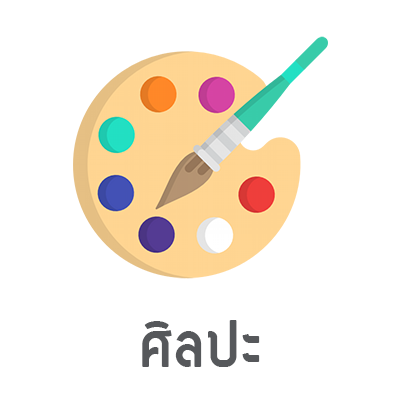
<style>
.page{position:relative;width:400px;height:400px;background:#ffffff}
.page>*{position:absolute;margin:0}
.t1{font:83.3px "Circular-Bold";color:#56585b}
</style>
<div class="page">
<p class="t1" style="left:142px;top:320px;width:118px;height:47px">ศิลปะ</p>
</div>
